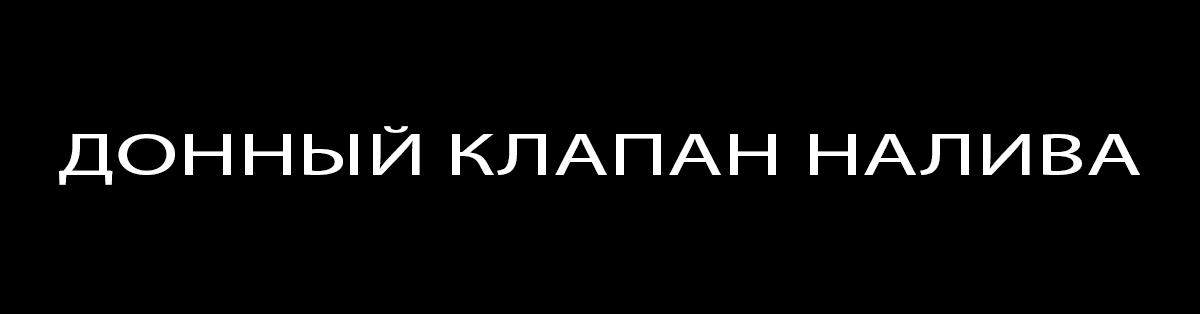
<style>
.page{position:relative;width:1200px;height:314px;background:#000000}
.page>*{position:absolute;margin:0}
.t1{font:60px "MyriadPro-Regular";color:#ffffff;scale:1.53 1}
</style>
<div class="page">
<p class="t1" style="left:59px;top:126px;width:1081px;height:59px">ДОННЫЙ КЛАПАН НАЛИВА</p>
</div>
